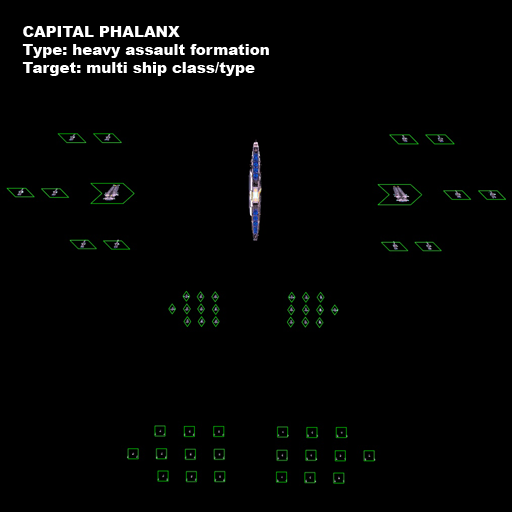
<style>
.page{position:relative;width:512px;height:512px;background:#000000}
.page>*{position:absolute;margin:0}
.t1{font:15px "Arial-Black";color:#ffffff}
</style>
<div class="page">
<p class="t1" style="left:22px;top:26px;width:247px;height:50px">CAPITAL PHALANX<br>Type: heavy assault formation<br>Target: multi ship class/type</p>
</div>
